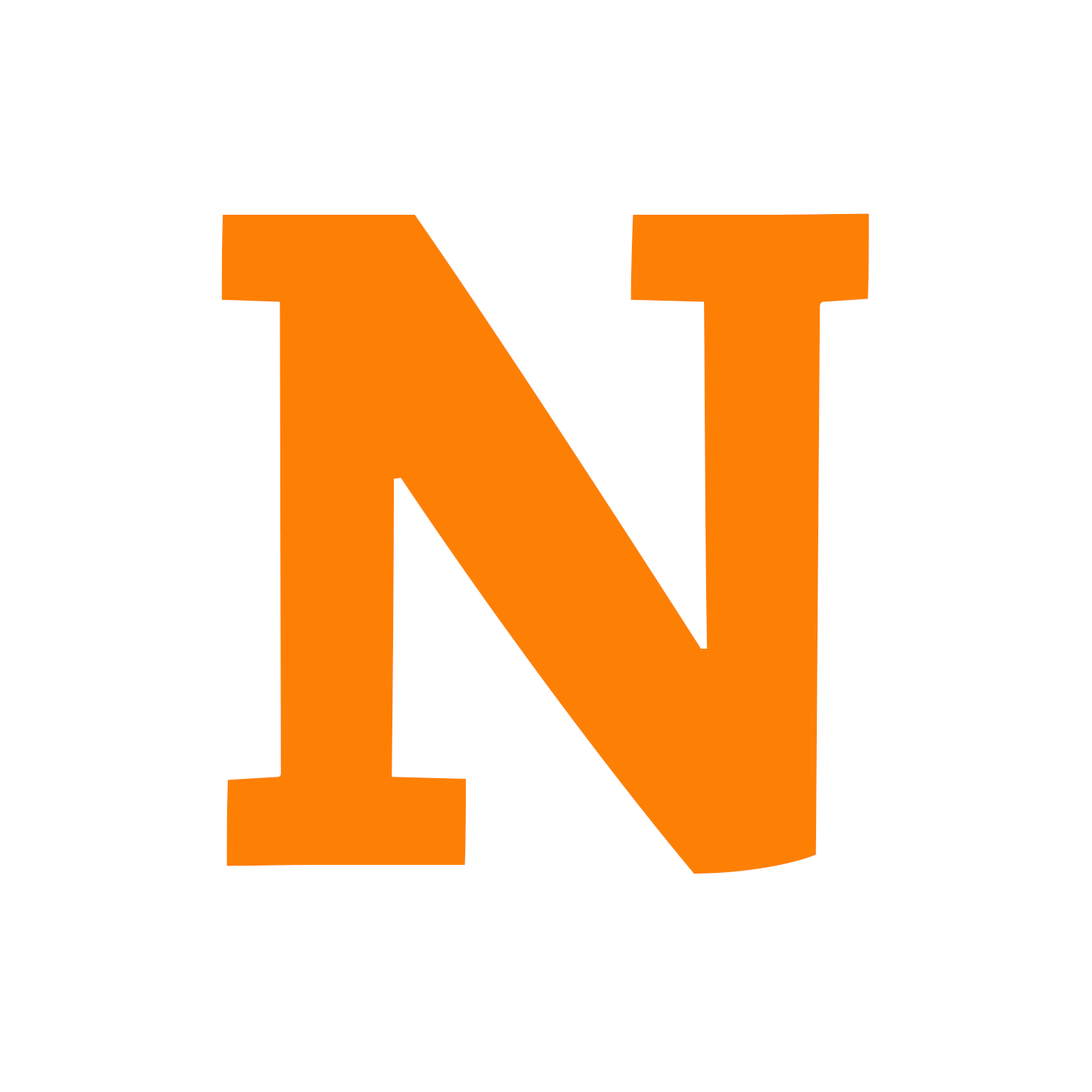
<style>
.page{position:relative;width:1092px;height:1092px;background:#ffffff}
.page>*{position:absolute;margin:0}
.t1{font:1000.4px "ChaparralPro-Bold";color:#fd8005}
</style>
<div class="page">
<p class="t1" style="left:221px;top:213px;width:648px;height:661px">N</p>
</div>
